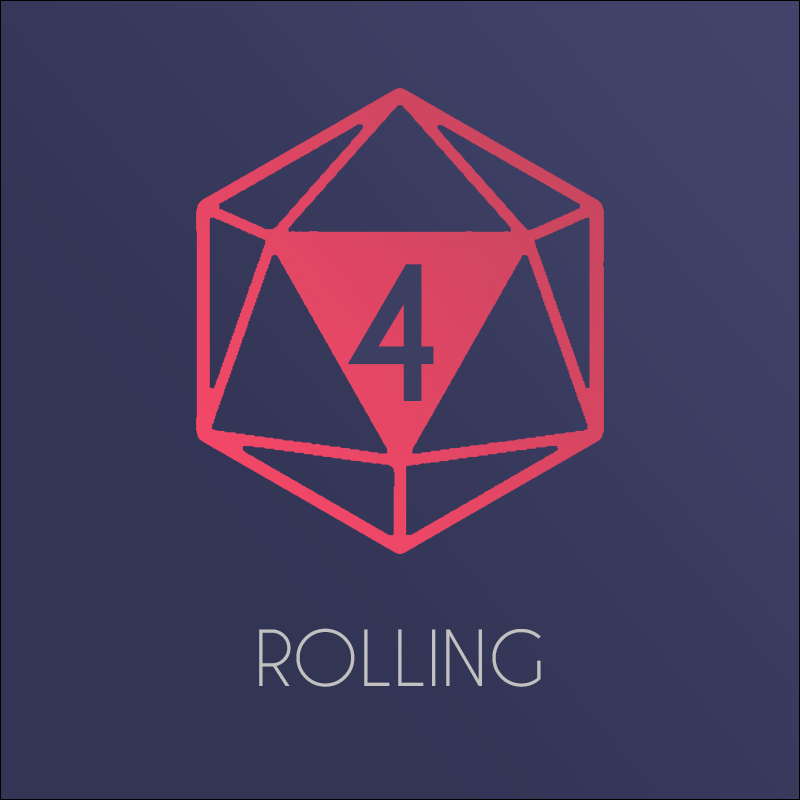
<style>
.page{position:relative;width:800px;height:800px;background:#333555}
.page>*{position:absolute;margin:0}
.t1{font:175.5px "CaviarDreams-Bold";color:#3c3e62}
.t2{font:72.3px "CaviarDreams";color:#c1c1c1}
</style>
<div class="page">
<p class="t1" style="left:347px;top:264px;width:87px;height:137px">4</p>
<p class="t2" style="left:259px;top:628px;width:282px;height:59px">ROLLING</p>
</div>
